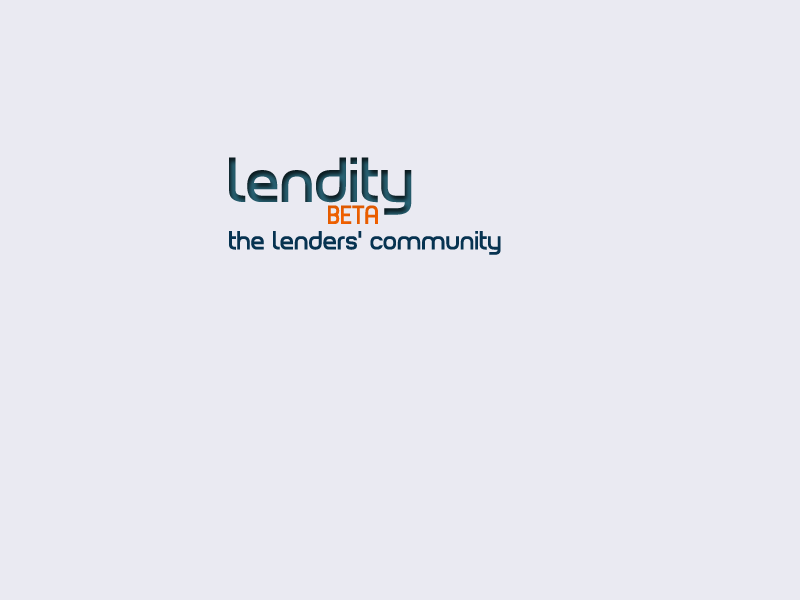
<style>
.page{position:relative;width:800px;height:600px;background:#eaeaf2}
.page>*{position:absolute;margin:0}
.t1{font:60px "PlanetEstyle"}
.t2{font:25px "PlanetEstyle";color:#ff6600}
.t3{font:25px "PlanetEstyle";color:#073351}
</style>
<div class="page">
<p class="t1" style="left:229px;top:157px;width:183px;height:58px">lendity</p>
<p class="t2" style="left:328px;top:205px;width:50px;height:19px">BETA</p>
<p class="t3" style="left:229px;top:231px;width:272px;height:24px">the lenders’ community</p>
</div>
